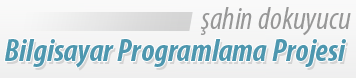
<style>
.page{position:relative;width:356px;height:78px}
.page>*{position:absolute;margin:0}
.t1{font:32px "MyriadPro-CondIt";color:#979797}
.t2{font:32px "MyriadPro-BoldCondIt";color:#4e97af}
</style>
<div class="page">
<p class="t1" style="left:200px;top:7px;width:151px;height:29px">şahin dokuyucu</p>
<p class="t2" style="left:5px;top:39px;width:341px;height:29px">Bilgisayar Programlama Projesi</p>
</div>
